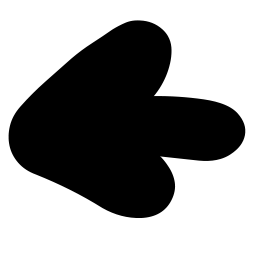
<style>
.page{position:relative;width:256px;height:256px;background:#ffffff}
.page>*{position:absolute;margin:0}
.t1{font:500px "Hansip";color:#000000}
.t2{font:600px "Hansip";color:#000000}
</style>
<div class="page">
<p class="t1" style="left:8px;top:20px;width:168px;height:198px">&lt;</p>
<p class="t2" style="left:81px;top:96px;width:165px;height:65px">-</p>
</div>
